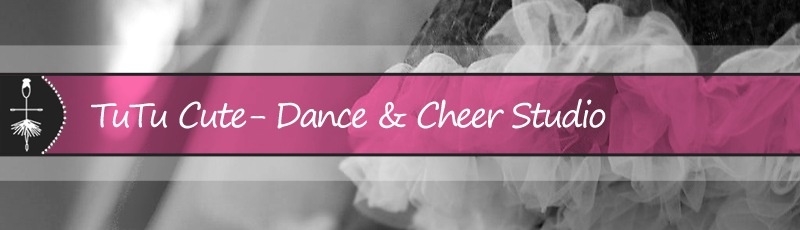
<style>
.page{position:relative;width:800px;height:230px}
.page>*{position:absolute;margin:0}
.t1{font:34px "SegoePrint";letter-spacing:-0.08em;color:#ffffff}
</style>
<div class="page">
<p class="t1" style="left:91px;top:98px;width:515px;height:31px">TuTu Cute- Dance &amp; Cheer Studio</p>
</div>
